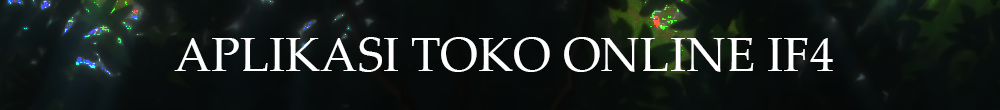
<style>
.page{position:relative;width:1000px;height:110px}
.page>*{position:absolute;margin:0}
.t1{font:48px "PalatinoLinotype-Roman";color:#fefefe}
</style>
<div class="page">
<p class="t1" style="left:174px;top:37px;width:659px;height:35px">APLIKASI TOKO ONLINE IF4</p>
</div>
